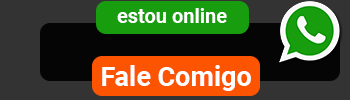
<style>
.page{position:relative;width:350px;height:100px;background:#333333}
.page>*{position:absolute;margin:0}
.t1{font:20px "Roboto-Bold";color:#ffffff}
.t2{font:27px "Roboto-Bold";color:#ffffff}
</style>
<div class="page">
<p class="t1" style="left:117px;top:8px;width:110px;height:15px">estou online</p>
<p class="t2" style="left:102px;top:65px;width:149px;height:26px">Fale Comigo</p>
</div>
